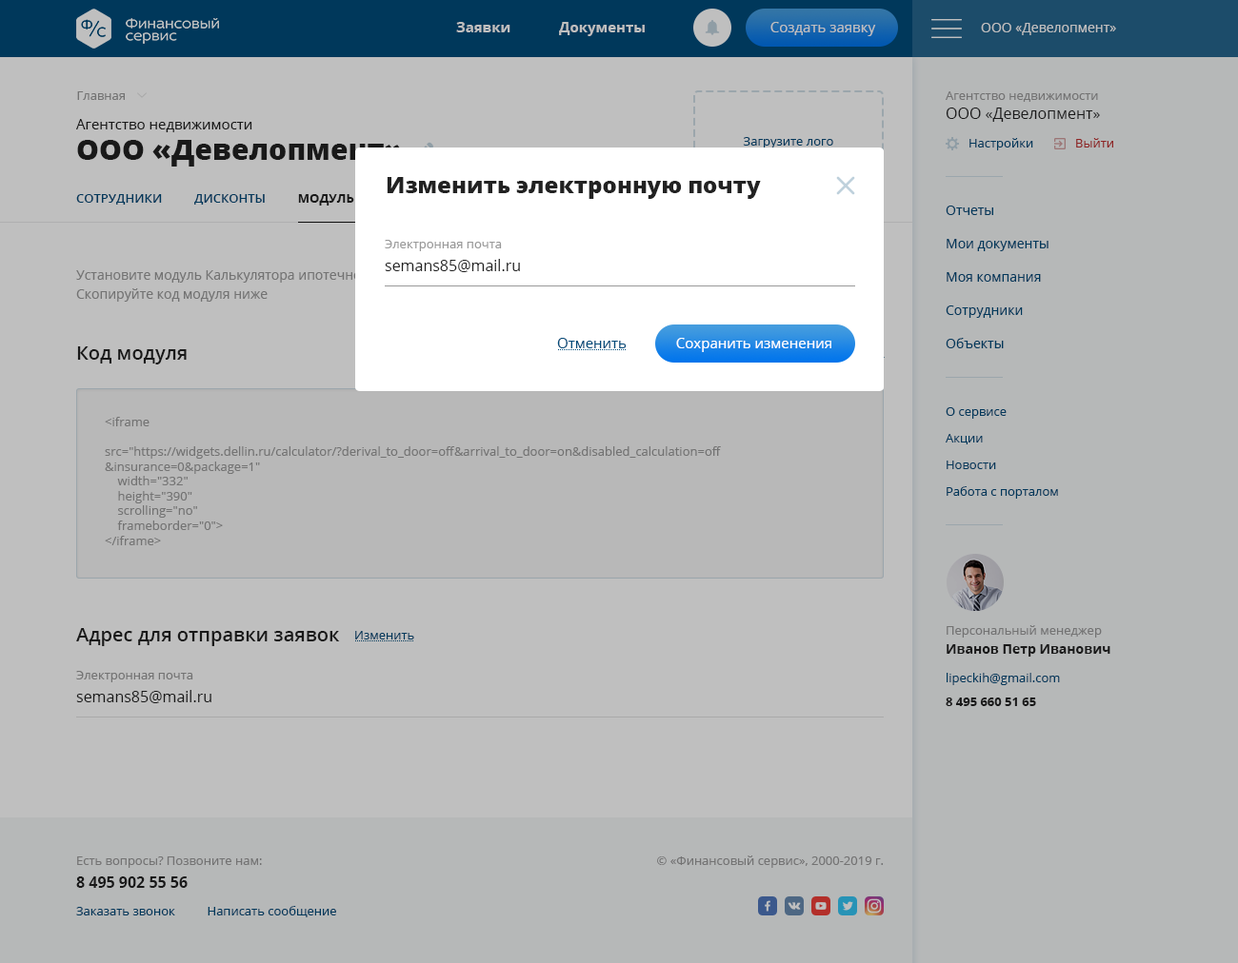
<style>
.page{position:relative;width:1238px;height:963px;background:#b6b8b8}
.page>*{position:absolute;margin:0}
.t1{font:14.3px "OpenSans-Bold";color:#bfbfbf}
.t2{font:14.3px "OpenSans";color:#bfbfbf}
.t3{font:13.3px "OpenSans";color:#bfbfbf}
.t4{font:12.4px "OpenSans";color:#737373}
.t5{font:12.4px "OpenSans"}
.t6{font:15.2px/19px "OpenSans"}
.t7{font:14.3px "OpenSans";color:#222222}
.t8{font:12.4px "OpenSans";color:#00385b}
.t9{font:28.6px "OpenSans-Extrabold";color:#222222}
.t10{font:22.8px "OpenSans-Extrabold";color:#222222}
.t11{font:12.4px "OpenSans-Semibold";text-transform:uppercase}
.t12{font:12.4px "OpenSans-Bold";text-transform:uppercase}
.t13{font:13.3px/33.3px "OpenSans";color:#00385b}
.t14{font:12.4px "OpenSans";color:#999999}
.t15{font:15.2px/22.8px "OpenSans";color:#222222}
.t16{font:14.3px "OpenSans";color:#004b7a}
.t17{font:14.3px "OpenSans";color:#ffffff}
.t18{font:19px "OpenSans-Semibold";color:#222222}
.t19{font:12.4px/26.7px "OpenSans";color:#00385b}
.t20{font:13.3px/19px "OpenSans-Bold";color:#222222}
.t21{font:15.2px/22.8px "OpenSans"}
.t22{font:12.4px "OpenSans-Bold";color:#222222}
.t23{font:12.4px/22.8px "OpenSans"}
.t24{font:15.2px/22.8px "OpenSans-Bold"}
</style>
<div class="page">
<p class="t1" style="left:456px;top:22px;width:189px;height:14px">Заявки             Документы</p>
<p class="t2" style="left:770px;top:22px;width:106px;height:14px">Создать заявку</p>
<p class="t3" style="left:981px;top:23px;width:135px;height:12px">ООО «Девелопмент»</p>
<p class="t4" style="left:77px;top:91px;width:48px;height:9px">Главная</p>
<p class="t5" style="left:945px;top:91px;width:155px;height:31px">Агентство недвижимости<br><span class="t6">ООО «Девелопмент»</span></p>
<p class="t7" style="left:76px;top:119px;width:176px;height:13px">Агентство недвижимости</p>
<p class="t8" style="left:743px;top:137px;width:90px;height:12px">Загрузите лого</p>
<p class="t9" style="left:77px;top:140px;width:326px;height:27px">ООО «Девелопмент»</p>
<p class="t5" style="left:969px;top:138px;width:144px;height:12px">Настройки             Выйти</p>
<p class="t10" style="left:387px;top:177px;width:374px;height:22px">Изменить электронную почту</p>
<p class="t11" style="left:76px;top:191px;width:336px;height:15px">Сотрудники          Дисконты          <span class="t12">модуль на сайт</span></p>
<p class="t13" style="left:945px;top:206px;width:103px;height:142px">Отчеты<br>Мои документы<br>Моя компания<br>Сотрудники<br>Объекты</p>
<p class="t14" style="left:385px;top:240px;width:135px;height:32px">Электронная почта<br><span class="t15">semans85@mail.ru</span></p>
<p class="t16" style="left:557px;top:338px;width:69px;height:10px">Отменить</p>
<p class="t17" style="left:676px;top:338px;width:155px;height:14px">Сохранить изменения</p>
<p class="t18" style="left:77px;top:347px;width:110px;height:18px">Код модуля</p>
<p class="t19" style="left:945px;top:407px;width:113px;height:92px">О сервисе<br>Акции<br>Новости<br>Работа с порталом</p>
<p class="t4" style="left:105px;top:417px;width:616px;height:129px">&lt;iframe<br>    src="https://widgets.dellin.ru/calculator/?derival_to_door=off&amp;arrival_to_door=on&amp;disabled_calculation=off&amp;insurance=0&amp;package=1"<br>    width="332"<br>    height="390"<br>    scrolling="no"<br>    frameborder="0"&gt;<br>&lt;/iframe&gt;</p>
<p class="t18" style="left:76px;top:628px;width:264px;height:18px">Адрес для отправки заявок</p>
<p class="t14" style="left:946px;top:625px;width:164px;height:32px">Персональный менеджер<br><span class="t20">Иванов Петр Иванович</span></p>
<p class="t8" style="left:355px;top:631px;width:59px;height:9px">Изменить</p>
<p class="t5" style="left:76px;top:671px;width:135px;height:33px">Электронная почта<br><span class="t21">semans85@mail.ru</span></p>
<p class="t8" style="left:946px;top:673px;width:114px;height:12px">lipeckih@gmail.com</p>
<p class="t22" style="left:945px;top:698px;width:91px;height:8px">8 495 660 51 65</p>
<p class="t23" style="left:76px;top:857px;width:186px;height:31px">Есть вопросы? Позвоните нам:<br><span class="t24">8 495 902 55 56</span></p>
<p class="t4" style="left:657px;top:856px;width:226px;height:12px">© «Финансовый сервис», 2000-2019 г.</p>
<p class="t8" style="left:76px;top:906px;width:260px;height:12px">Заказать звонок          Написать сообщение</p>
</div>
